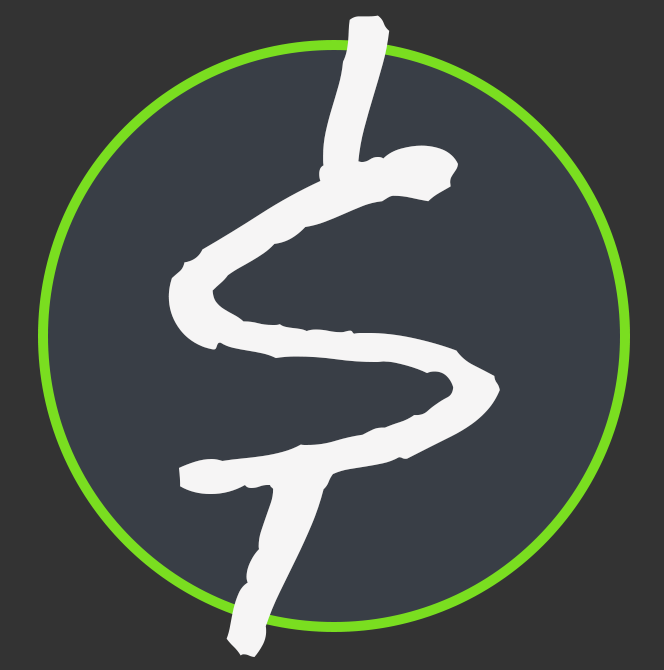
<style>
.page{position:relative;width:664px;height:670px;background:#393e46}
.page>*{position:absolute;margin:0}
.t1{font:400px "RockSalt";letter-spacing:-0.025em;color:#f6f5f5}
</style>
<div class="page">
<p class="t1" style="left:168px;top:15px;width:332px;height:642px">$</p>
</div>
